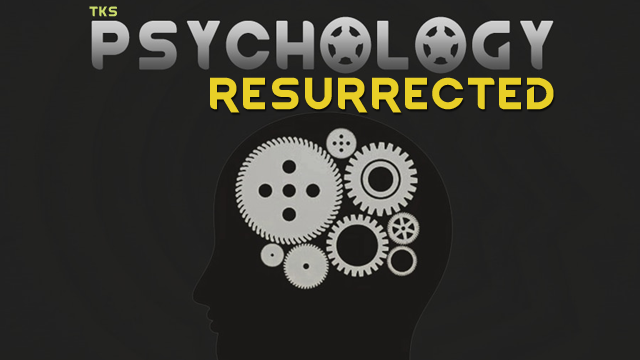
<style>
.page{position:relative;width:640px;height:360px;background:#222220}
.page>*{position:absolute;margin:0}
.t1{font:12px "RimWordFont";color:#cadb6a}
.t2{font:38.2px "RimWordFont";color:#e8cf27}
</style>
<div class="page">
<p class="t1" style="left:89px;top:6px;width:28px;height:11px">tks</p>
<p class="t2" style="left:210px;top:77px;width:344px;height:36px">RESURRECTED</p>
</div>
